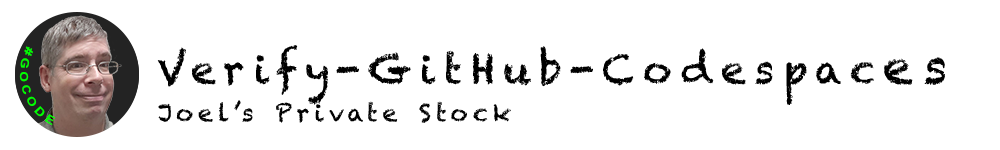
<style>
.page{position:relative;width:1000px;height:150px;background:#ffffff}
.page>*{position:absolute;margin:0}
.t1{font:11.2px "Arial-BoldMT";letter-spacing:0.2em;color:#00ff00}
.t2{font:40px "Chalkduster";letter-spacing:0.2em;color:#000000}
.t3{font:48px "Chalkduster";letter-spacing:0.2em;color:#000000}
.t4{font:24px "Chalkduster";letter-spacing:0.2em;color:#000000}
</style>
<div class="page">
<p class="t1" style="left:19px;top:46px;width:37px;height:80px;rotate:72deg">#GOCODE</p>
<p class="t2" style="left:157px;top:45px;width:788px;height:60px">Verify-GitHub-Codespac<span class="t3">es</span></p>
<p class="t4" style="left:158px;top:100px;width:353px;height:23px">Joel’s Private Stock</p>
</div>
